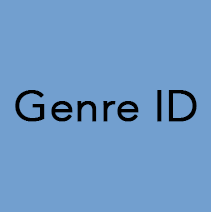
<style>
.page{position:relative;width:211px;height:212px;background:#729fcf}
.page>*{position:absolute;margin:0}
.t1{font:43.8px "Avenir-Light";color:#000000;font-weight:bold}
</style>
<div class="page">
<p class="t1" style="left:15px;top:90px;width:182px;height:32px">Genre ID</p>
</div>
